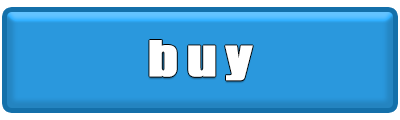
<style>
.page{position:relative;width:400px;height:120px;background:#2a98dd}
.page>*{position:absolute;margin:0}
.t1{font:41.7px "Anton";letter-spacing:0.125em;color:#ffffff;font-weight:bold;scale:1.41 1}
</style>
<div class="page">
<p class="t1" style="left:149px;top:40px;width:104px;height:41px">buy</p>
</div>
